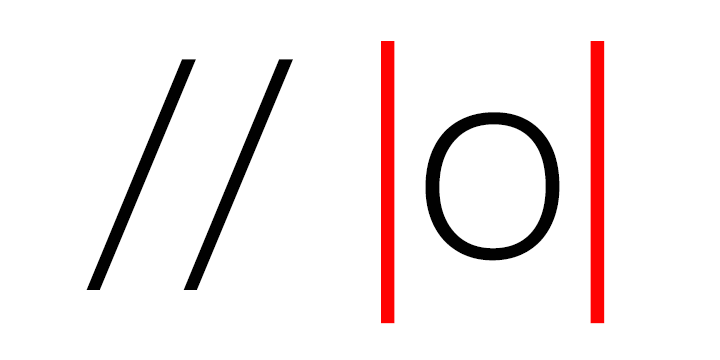
<style>
.page{position:relative;width:720px;height:360px;background:#ffffff}
.page>*{position:absolute;margin:0}
.t1{font:261.3px "MicrosoftJhengHeiUILight";letter-spacing:-0.025em;color:#010101}
.t2{font:261.3px "MicrosoftJhengHeiUILight";letter-spacing:-0.025em;color:#ff0202}
</style>
<div class="page">
<p class="t1" style="left:86px;top:41px;width:519px;height:283px">// <span class="t2">|</span>o<span class="t2">|</span></p>
</div>
